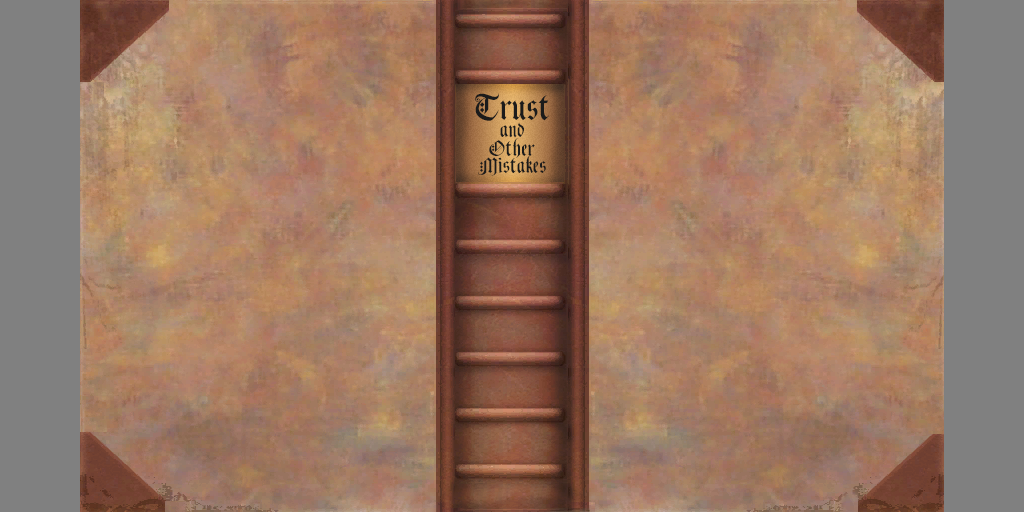
<style>
.page{position:relative;width:1024px;height:512px}
.page>*{position:absolute;margin:0}
.t1{font:41.5px "BlackKnightFLF";color:#1b1b1b}
.t2{font:24.9px "BlackKnightFLF";color:#1b1b1b}
</style>
<div class="page">
<p class="t1" style="left:475px;top:93px;width:74px;height:28px">Trust</p>
<p class="t2" style="left:500px;top:122px;width:24px;height:16px">and</p>
<p class="t2" style="left:489px;top:138px;width:46px;height:20px">Other</p>
<p class="t2" style="left:478px;top:155px;width:68px;height:21px">Mistakes</p>
</div>
